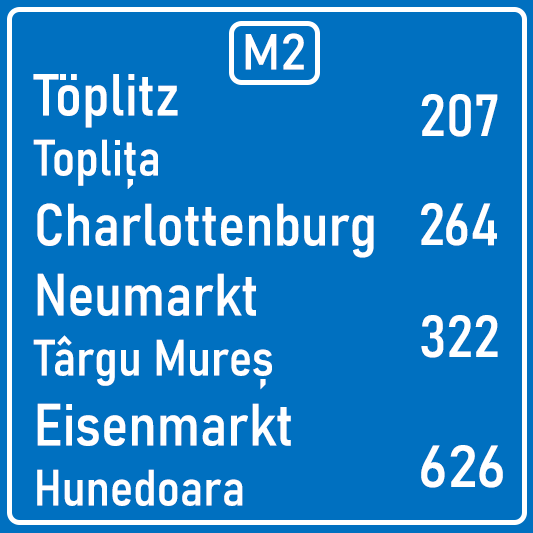
<style>
.page{position:relative;width:533px;height:533px;background:#0070c0}
.page>*{position:absolute;margin:0}
.t1{font:50px "Bahnschrift";color:#ffffff}
.t2{font:58.3px "Bahnschrift-SemiCondensed";color:#ffffff}
.t3{font:50px "Bahnschrift-SemiCondensed";color:#ffffff}
.t4{font:58.3px "Bahnschrift";color:#ffffff}
</style>
<div class="page">
<p class="t1" style="left:245px;top:33px;width:59px;height:37px">M2</p>
<p class="t2" style="left:33px;top:74px;width:341px;height:432px">Töplitz<br><span class="t3">Toplița<br></span>Charlottenburg<br>Neumarkt<br><span class="t3">Târgu Mureș<br></span>Eisenmarkt<br><span class="t3">Hunedoara</span></p>
<p class="t2" style="left:421px;top:94px;width:77px;height:43px">207</p>
<p class="t2" style="left:421px;top:203px;width:76px;height:43px">264</p>
<p class="t2" style="left:421px;top:315px;width:77px;height:43px">322</p>
<p class="t4" style="left:421px;top:445px;width:82px;height:43px">626</p>
</div>
